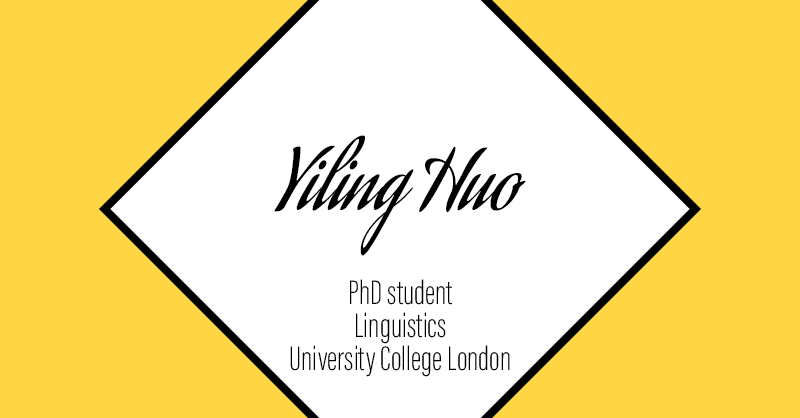
<style>
.page{position:relative;width:800px;height:418px;background:#ffd545}
.page>*{position:absolute;margin:0}
.t1{font:80px "AguafinaScript-Regular";color:#000000}
.t2{font:35px/33px "AcuminConcept-ExtraCondensedExtraLight";color:#000000}
</style>
<div class="page">
<p class="t1" style="left:274px;top:135px;width:252px;height:121px">Yiling Huo</p>
<p class="t2" style="left:290px;top:279px;width:220px;height:98px;text-align:center">PhD student<br>Linguistics<br>University College London</p>
</div>
